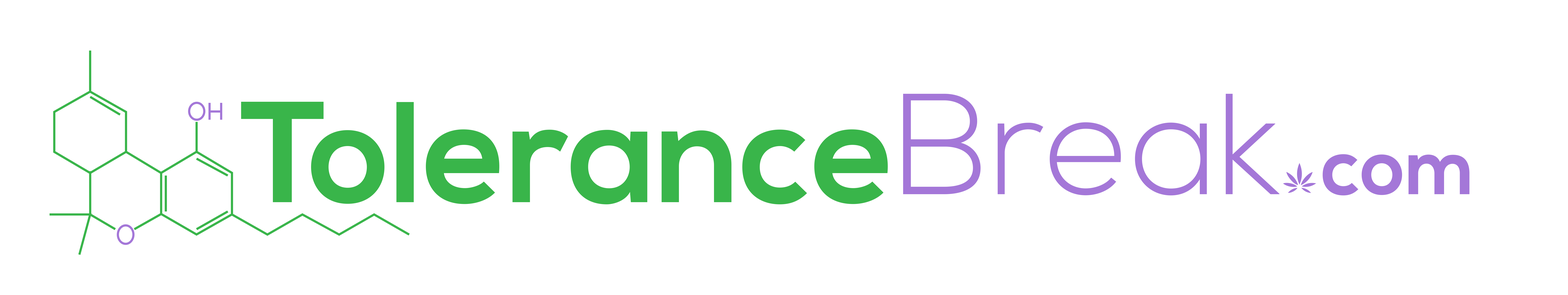
<style>
.page{position:relative;width:1568px;height:295px;background:#ffffff}
.page>*{position:absolute;margin:0}
.t1{font:143.1px "NexaBold";color:#39b54a}
.t2{font:143.1px "NexaLight";color:#a477d8}
.t3{font:78.8px "NexaBold";color:#a477d8}
</style>
<div class="page">
<p class="t1" style="left:241px;top:102px;width:647px;height:102px">Tolerance</p>
<p class="t2" style="left:903px;top:94px;width:376px;height:101px">Break</p>
<p class="t3" style="left:1323px;top:154px;width:146px;height:41px">com</p>
</div>
